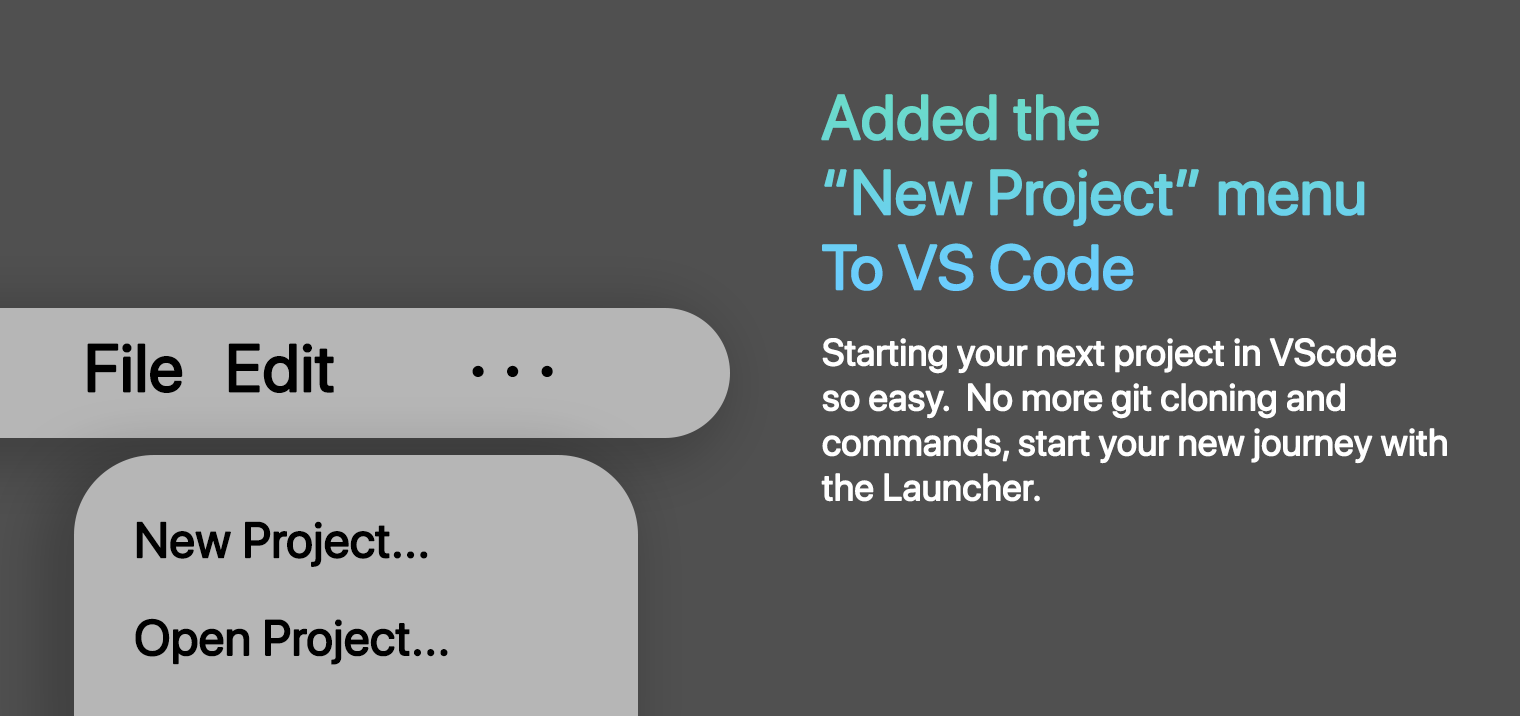
<style>
.page{position:relative;width:1520px;height:716px;background:#505050}
.page>*{position:absolute;margin:0}
.t1{font:62.5px "SFProDisplay-Regular";font-weight:bold}
.t2{font:37.5px "SFProDisplay-Regular";color:#ffffff;font-weight:bold}
.t3{font:66.7px "SFProDisplay-Regular";color:#000000;font-weight:bold}
.t4{font:79.2px "SFProDisplay-Regular";color:#000000;font-weight:bold}
.t5{font:49.5px "SFProDisplay-Regular";color:#000000;font-weight:bold}
</style>
<div class="page">
<p class="t1" style="left:821px;top:94px;width:544px;height:197px">Added the<br>“New Project” menu<br>To VS Code</p>
<p class="t2" style="left:821px;top:338px;width:626px;height:164px">Starting your next project in VScode<br>so easy.  No more git cloning and<br>commands, start your new journey with<br>the Launcher.</p>
<p class="t3" style="left:87px;top:343px;width:96px;height:50px">File</p>
<p class="t3" style="left:228px;top:343px;width:106px;height:50px">Edit</p>
<p class="t4" style="left:472px;top:365px;width:81px;height:12px">. . .</p>
<p class="t5" style="left:136px;top:521px;width:292px;height:46px">New Project...</p>
<p class="t5" style="left:135px;top:618px;width:313px;height:47px">Open Project...</p>
</div>
